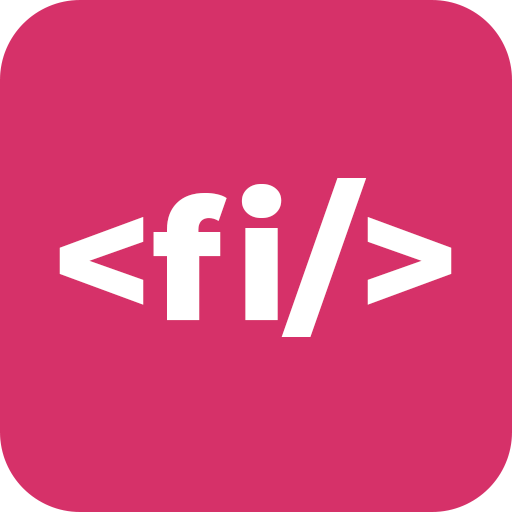
<style>
.page{position:relative;width:512px;height:512px;background:#d63169}
.page>*{position:absolute;margin:0}
.t1{font:169.1px "Montserrat-ExtraBold";color:#ffffff}
</style>
<div class="page">
<p class="t1" style="left:59px;top:178px;width:393px;height:159px">&lt;fi/&gt;</p>
</div>
